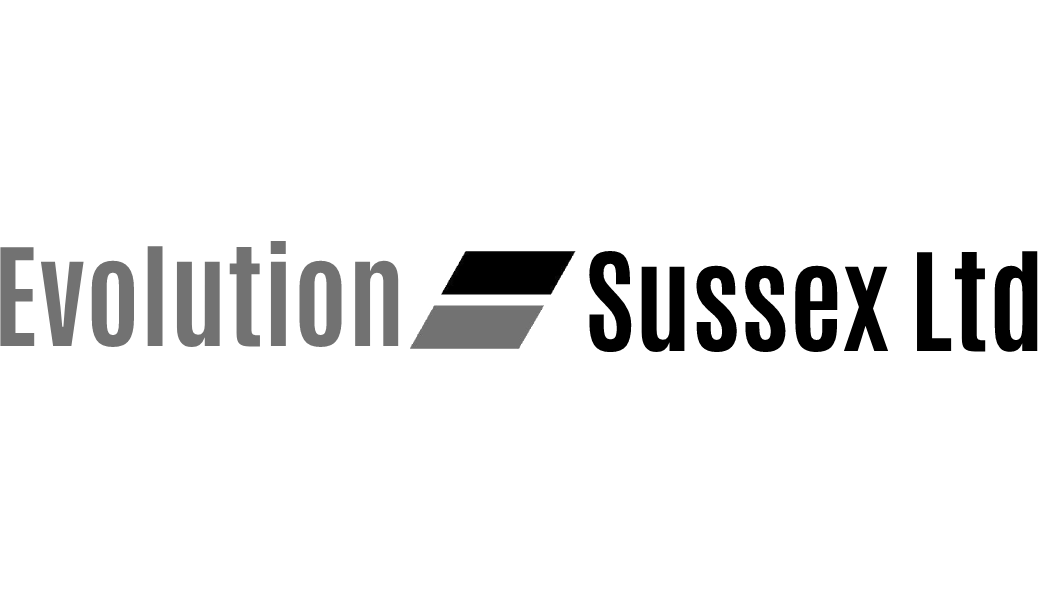
<style>
.page{position:relative;width:1050px;height:600px;background:#ffffff}
.page>*{position:absolute;margin:0}
.t1{font:115px "Antonio-Bold";color:#727272}
.t2{font:115px "Antonio-Bold";color:#000000}
</style>
<div class="page">
<p class="t1" style="left:0px;top:241px;width:399px;height:107px">Evolution</p>
<p class="t2" style="left:589px;top:250px;width:449px;height:103px">Sussex Ltd</p>
</div>
